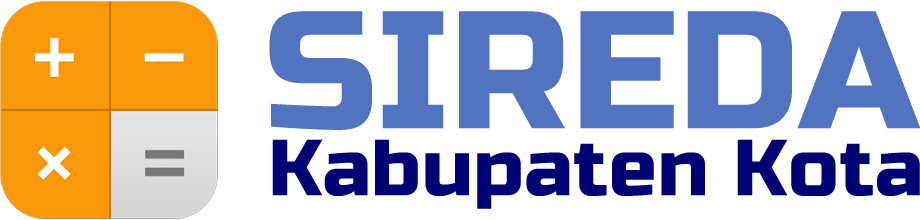
<style>
.page{position:relative;width:920px;height:220px;background:#ffffff}
.page>*{position:absolute;margin:0}
.t1{font:166.7px "RussoOne-Regular";letter-spacing:0.005em;color:#5273c0}
.t2{font:79.2px "RussoOne-Regular";letter-spacing:0.005em;color:#000273}
</style>
<div class="page">
<p class="t1" style="left:269px;top:11px;width:652px;height:119px">SIREDA</p>
<p class="t2" style="left:272px;top:139px;width:648px;height:70px">Kabupaten Kota</p>
</div>
